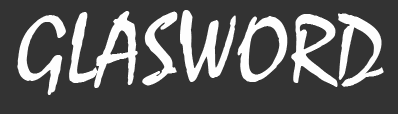
<style>
.page{position:relative;width:398px;height:114px;background:#333333}
.page>*{position:absolute;margin:0}
.t1{font:100px "Mistral";color:#fefefe}
</style>
<div class="page">
<p class="t1" style="left:17px;top:10px;width:367px;height:85px">GLASWORD</p>
</div>
